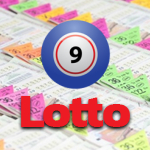
<style>
.page{position:relative;width:150px;height:150px}
.page>*{position:absolute;margin:0}
.t1{font:48px "Kanit-Bold";color:#ed1c24}
</style>
<div class="page">
<p class="t1" style="left:21px;top:96px;width:109px;height:31px">Lotto</p>
</div>
